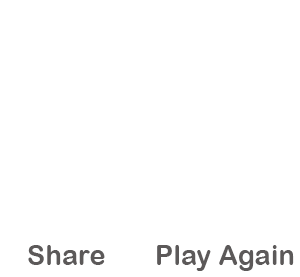
<style>
.page{position:relative;width:300px;height:277px;background:#ffffff}
.page>*{position:absolute;margin:0}
.t1{font:27.9px "ArialRoundedMTBold";color:#5c5959}
</style>
<div class="page">
<p class="t1" style="left:28px;top:245px;width:77px;height:20px">Share</p>
<p class="t1" style="left:157px;top:245px;width:137px;height:26px">Play Again</p>
</div>
